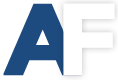
<style>
.page{position:relative;width:118px;height:80px;background:#ffffff}
.page>*{position:absolute;margin:0}
.t1{font:100.4px "Montserrat-Bold";letter-spacing:-0.01em;color:#1d4b7f;font-weight:bold}
.t2{font:100.4px "Montserrat-Bold";letter-spacing:-0.01em;color:#ffffff;font-weight:bold}
</style>
<div class="page">
<p class="t1" style="left:3px;top:3px;width:79px;height:73px">A</p>
<p class="t2" style="left:63px;top:3px;width:52px;height:73px">F</p>
</div>
